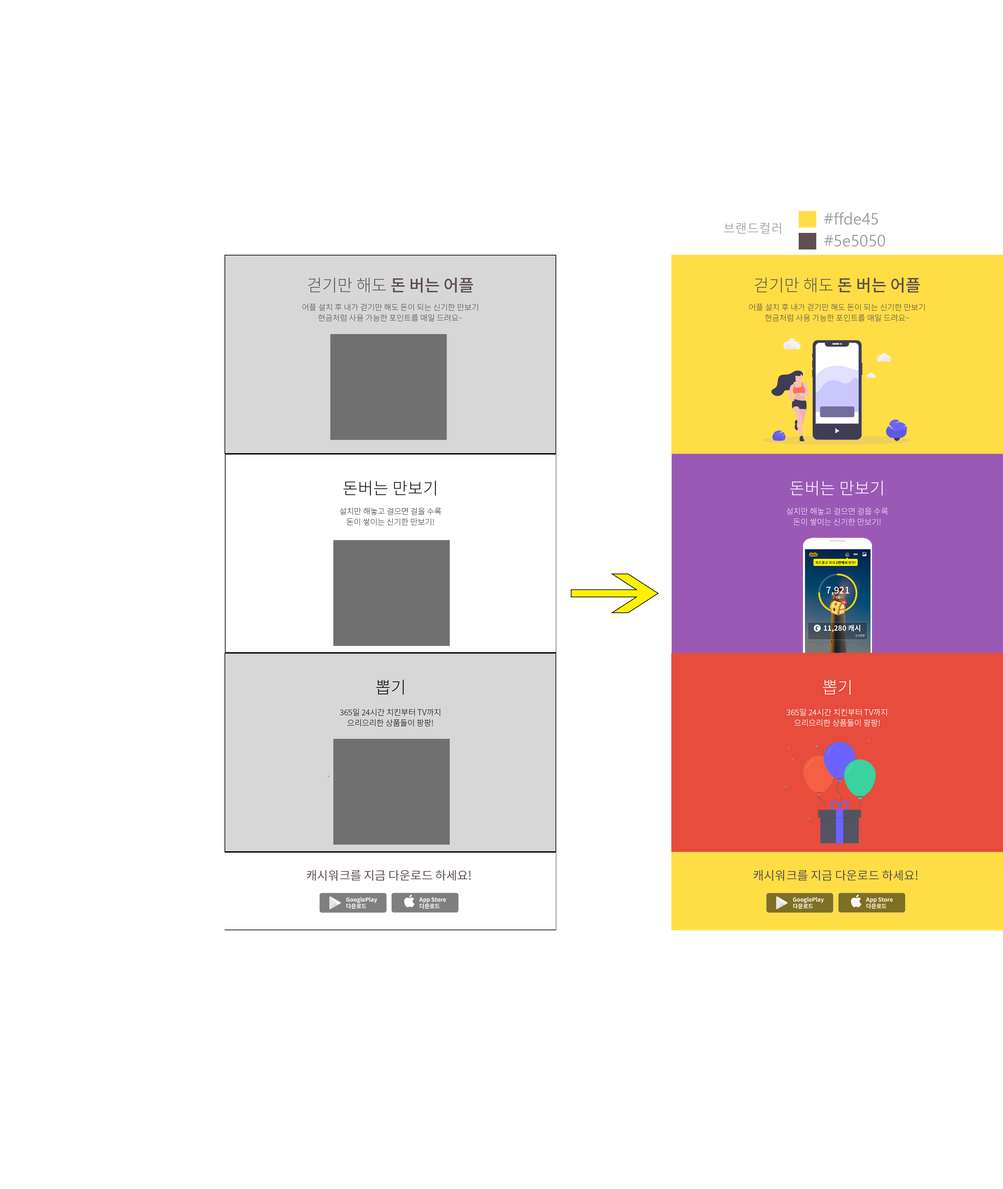
<style>
.page{position:relative;width:1003px;height:1189px;background:#ffffff}
.page>*{position:absolute;margin:0}
.t1{font:15.9px "MalgunGothic";color:#9f9e9e}
.t2{font:11.9px "MalgunGothic";color:#9f9e9e}
.t3{font:16.6px "NotoSansKR-Medium";color:#5e5050}
.t4{font:16.6px "NotoSansKR-Light";color:#5e5050}
.t5{font:8px/10.6px "NotoSansKR-Light";color:#5e5050}
.t6{font:16.6px "NotoSansKR-Light";color:#070707}
.t7{font:16.6px "NotoSansKR-Light";color:#ffffff}
.t8{font:8px/10.6px "NotoSansKR-Thin";color:#0a0a0a}
.t9{font:8px/10.6px "NotoSansKR-Thin";color:#ffffff}
.t10{font:16.6px "NotoSansKR-Light";color:#000000}
.t11{font:8px/10.6px "NotoSansKR-Light";color:#010101}
.t12{font:8px/10.6px "NotoSansKR-Light";color:#ffffff}
.t13{font:11.9px "NotoSansKR-Regular";color:#5e5050}
</style>
<div class="page">
<p class="t1" style="left:824px;top:212px;width:54px;height:13px">#ffde45</p>
<p class="t2" style="left:724px;top:223px;width:57px;height:11px">브랜드컬러</p>
<p class="t1" style="left:824px;top:235px;width:61px;height:11px">#5e5050</p>
<p class="t3" style="left:308px;top:277px;width:165px;height:16px"><span class="t4">걷기만 해도 </span>돈 버는 어플</p>
<p class="t3" style="left:755px;top:277px;width:165px;height:16px"><span class="t4">걷기만 해도 </span>돈 버는 어플</p>
<p class="t5" style="left:302px;top:303px;width:176px;height:19px;text-align:center">어플 설치 후 내가 걷기만 해도 돈이 되는 신기한 만보기 <br>현금처럼 사용 가능한 포인트를 매일 드려요~</p>
<p class="t5" style="left:749px;top:303px;width:176px;height:19px;text-align:center">어플 설치 후 내가 걷기만 해도 돈이 되는 신기한 만보기 <br>현금처럼 사용 가능한 포인트를 매일 드려요~</p>
<p class="t6" style="left:343px;top:480px;width:93px;height:16px">돈버는 만보기</p>
<p class="t7" style="left:790px;top:480px;width:93px;height:16px">돈버는 만보기</p>
<p class="t8" style="left:340px;top:507px;width:101px;height:19px;text-align:center">설치만 해놓고 걸으면 걸을 수록<br>돈이 쌓이는 신기한 만보기!</p>
<p class="t9" style="left:786px;top:507px;width:102px;height:19px;text-align:center">설치만 해놓고 걸으면 걸을 수록<br>돈이 쌓이는 신기한 만보기!</p>
<p class="t10" style="left:376px;top:680px;width:28px;height:15px">뽑기</p>
<p class="t7" style="left:823px;top:680px;width:27px;height:15px">뽑기</p>
<p class="t11" style="left:340px;top:709px;width:100px;height:17px;text-align:center">365일 24시간 치킨부터 TV까지<br>으리으리한 상품들이 팡팡!</p>
<p class="t12" style="left:786px;top:709px;width:101px;height:17px;text-align:center">365일 24시간 치킨부터 TV까지<br>으리으리한 상품들이 팡팡!</p>
<p class="t13" style="left:307px;top:870px;width:164px;height:11px">캐시워크를 지금 다운로드 하세요!</p>
<p class="t13" style="left:754px;top:870px;width:163px;height:11px">캐시워크를 지금 다운로드 하세요!</p>
</div>
